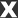
<style>
.page{position:relative;width:18px;height:18px;background:#ffffff}
.page>*{position:absolute;margin:0}
.t1{font:22px "Arial-Black";color:#ffffff}
</style>
<div class="page">
<p class="t1" style="left:0px;top:1px;width:18px;height:17px">X</p>
</div>
